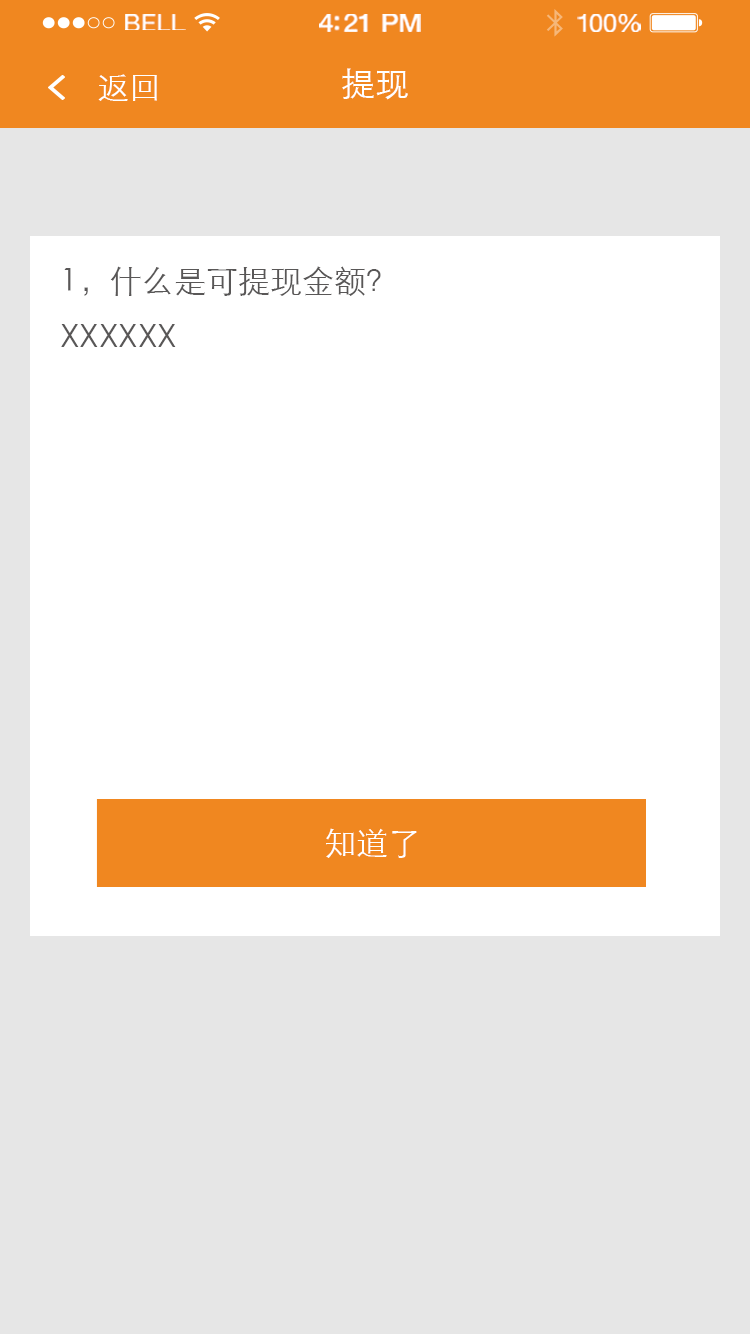
<style>
.page{position:relative;width:750px;height:1334px;background:#e6e6e6}
.page>*{position:absolute;margin:0}
.t1{font:23.3px "HelveticaNeue";letter-spacing:0.02em;color:#ffffff;scale:1.06 1}
.t2{font:25.3px "HelveticaNeue-Medium";letter-spacing:-0.02em;color:#ffffff;scale:1.06 1}
.t3{font:24.3px "HelveticaNeue";letter-spacing:-0.02em;color:#ffffff;scale:1.06 1}
.t4{font:32px "STXihei";color:#ffffff}
.t5{font:34px "STXihei";color:#ffffff}
.t6{font:32px/56px "STXihei";color:#595757}
</style>
<div class="page">
<p class="t1" style="left:125px;top:14px;width:61px;height:16px">BELL</p>
<p class="t2" style="left:319px;top:14px;width:102px;height:18px">4:21 PM</p>
<p class="t3" style="left:577px;top:14px;width:64px;height:18px">100%</p>
<p class="t4" style="left:98px;top:74px;width:59px;height:27px">返回</p>
<p class="t5" style="left:342px;top:68px;width:66px;height:32px">提现</p>
<p class="t6" style="left:61px;top:266px;width:320px;height:81px">1，什么是可提现金额？<br>XXXXXX</p>
<p class="t4" style="left:326px;top:828px;width:91px;height:30px">知道了</p>
</div>
